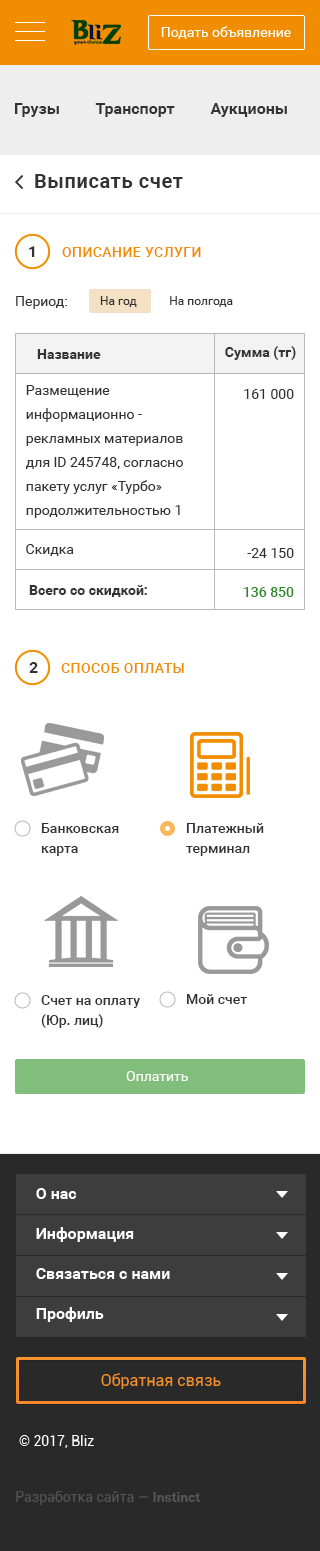
<style>
.page{position:relative;width:320px;height:1551px;background:#ffffff}
.page>*{position:absolute;margin:0}
.t1{font:20px "Roboto-Bold";letter-spacing:0.03em;color:#333333}
.t2{font:16px "Roboto-Bold";color:#333333}
.t3{font:14px "Roboto-Medium";letter-spacing:0.03em;color:#f08d00;text-transform:uppercase}
.t4{font:14px "Roboto-Regular";color:#333333}
.t5{font:12px "Roboto-Regular";color:#333333}
.t6{font:14px "Roboto-Bold";color:#333333}
.t7{font:14px/24px "Roboto-Regular";color:#333333}
.t8{font:14px/24px "Roboto-Medium";color:#298921}
.t9{font:14px/20px "Roboto-Medium";color:#333333}
.t10{font:14px "Roboto-Medium";color:#333333}
.t11{font:14px "Roboto-Regular";color:#ffffff}
</style>
<div class="page">
<p class="t1" style="left:35px;top:174px;width:148px;height:14px">Выписать счет</p>
<p class="t2" style="left:29px;top:246px;width:6px;height:11px">1</p>
<p class="t3" style="left:62px;top:247px;width:139px;height:10px">Описание услуги</p>
<p class="t4" style="left:16px;top:296px;width:51px;height:13px">Период:</p>
<p class="t5" style="left:100px;top:296px;width:133px;height:11px">На год           На полгода</p>
<p class="t6" style="left:37px;top:349px;width:64px;height:10px">Название</p>
<p class="t6" style="left:225px;top:346px;width:71px;height:14px">Сумма (тг)</p>
<p class="t7" style="left:25px;top:385px;width:158px;height:133px">Размещение информационно - рекламных материалов для ID 245748, согласно пакету услуг «Турбо» продолжительностью 1 год.</p>
<p class="t4" style="left:244px;top:389px;width:50px;height:10px">161 000</p>
<p class="t4" style="left:26px;top:544px;width:48px;height:12px">Скидка</p>
<p class="t7" style="left:243px;top:548px;width:51px;height:49px;text-align:right">-24 150<br><span class="t8">136 850</span></p>
<p class="t6" style="left:29px;top:585px;width:118px;height:12px">Всего со скидкой:</p>
<p class="t2" style="left:29px;top:662px;width:9px;height:11px">2</p>
<p class="t3" style="left:61px;top:663px;width:123px;height:10px">Способ оплаты</p>
<p class="t9" style="left:41px;top:823px;width:78px;height:33px">Банковская <br>карта</p>
<p class="t9" style="left:186px;top:823px;width:78px;height:33px">Платежный <br>терминал</p>
<p class="t9" style="left:41px;top:995px;width:99px;height:33px">Счет на оплату <br>(Юр. лиц)</p>
<p class="t10" style="left:186px;top:994px;width:61px;height:10px">Мой счет</p>
<p class="t11" style="left:126px;top:1071px;width:62px;height:10px">Оплатить</p>
</div>
